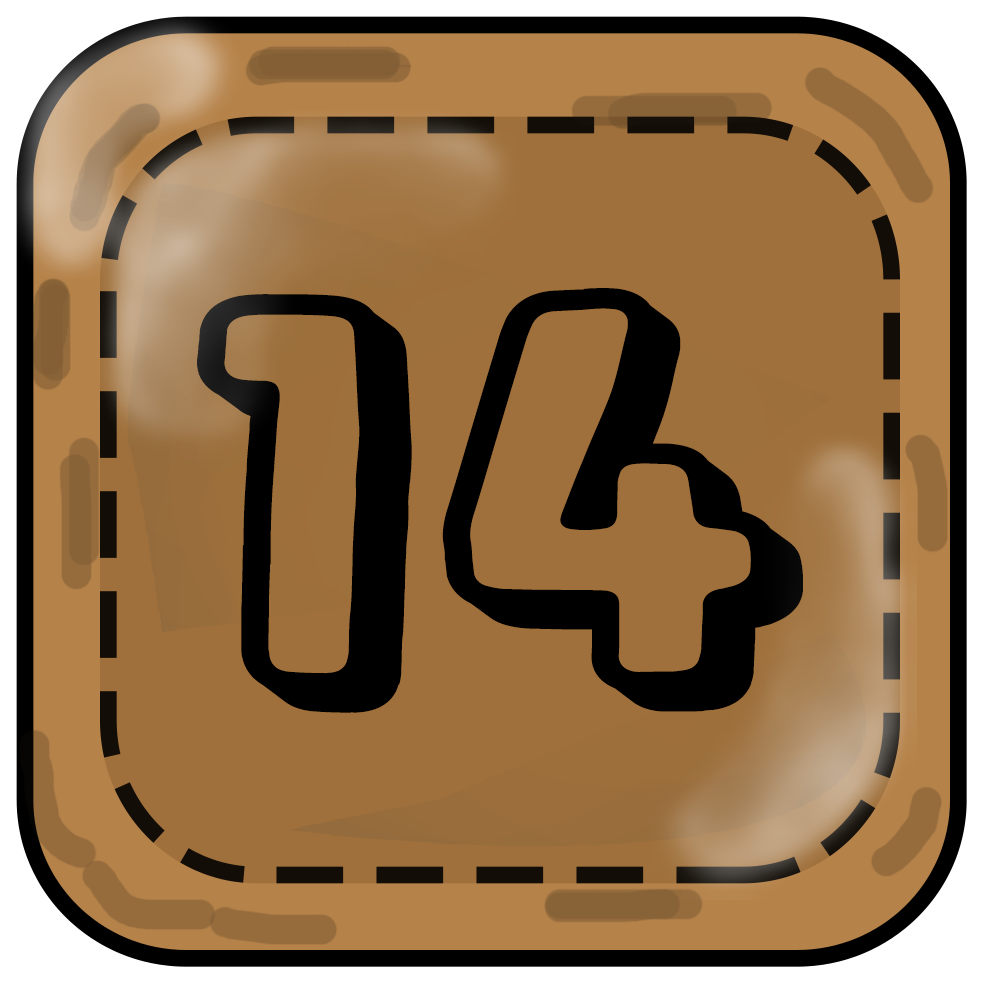
<style>
.page{position:relative;width:1000px;height:1000px;background:#9f703b}
.page>*{position:absolute;margin:0}
.t1{font:406.5px "SugarpunchDEMO";letter-spacing:0.1em;color:#000000;scale:1.33 1}
</style>
<div class="page">
<p class="t1" style="left:197px;top:288px;width:606px;height:425px">14</p>
</div>
